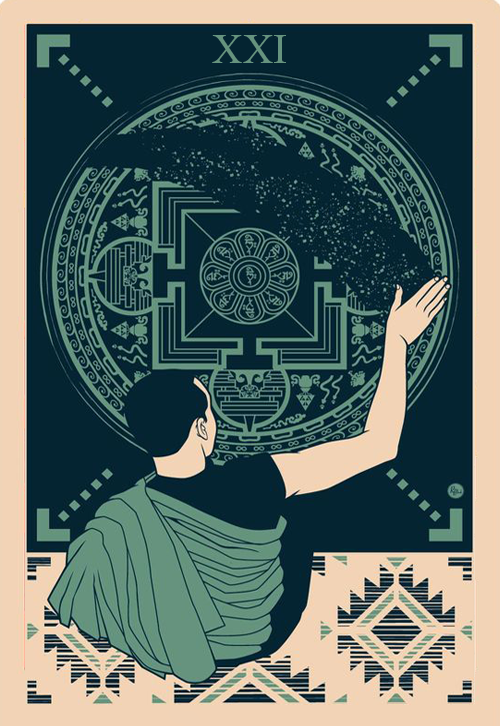
<style>
.page{position:relative;width:500px;height:726px}
.page>*{position:absolute;margin:0}
.t1{font:41.9px "TimesNewRomanPSMT";color:#66937e}
</style>
<div class="page">
<p class="t1" style="left:212px;top:35px;width:74px;height:28px">XXI</p>
</div>
